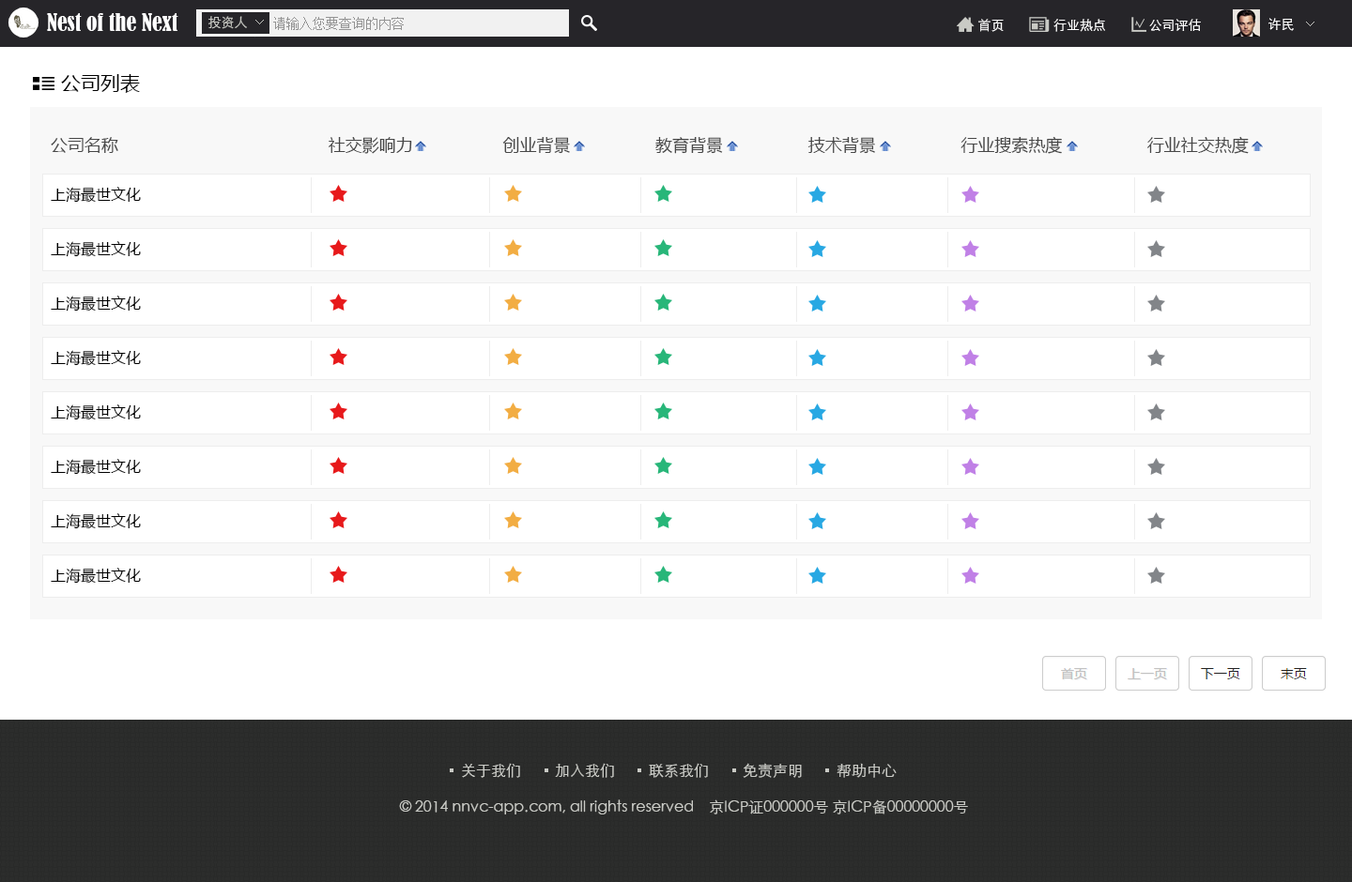
<style>
.page{position:relative;width:1352px;height:882px;background:#ffffff}
.page>*{position:absolute;margin:0}
.t1{font:22.5px "BernardMT-Condensed";color:#ffffff}
.t2{font:13.1px "STXihei";color:#c9cac5}
.t3{font:13.1px "SimSun";color:#949494}
.t4{font:13.1px "STXihei";color:#ffffff}
.t5{font:13.1px "MyriadPro-Regular";color:#c9cac5}
.t6{font:19.7px "MicrosoftYaHei";color:#000000}
.t7{font:16.9px "MicrosoftYaHei";color:#474747}
.t8{font:15px "MicrosoftYaHei";color:#000000}
.t9{font:15px "STXihei";color:#c9cac5}
</style>
<div class="page">
<p class="t1" style="left:47px;top:13px;width:131px;height:18px">Nest of the Next</p>
<p class="t2" style="left:208px;top:16px;width:39px;height:13px">投资人</p>
<p class="t3" style="left:273px;top:17px;width:131px;height:13px">请输入您要查询的内容</p>
<p class="t4" style="left:1268px;top:18px;width:25px;height:13px">许民</p>
<p class="t5" style="left:255px;top:20px;width:9px;height:4px;rotate:-90deg">&lt;</p>
<p class="t4" style="left:978px;top:19px;width:222px;height:13px">首页               行业热点             公司评估</p>
<p class="t5" style="left:1306px;top:22px;width:8px;height:4px;rotate:-90deg">&lt;</p>
<p class="t6" style="left:61px;top:74px;width:79px;height:19px">公司列表</p>
<p class="t7" style="left:51px;top:136px;width:1197px;height:18px">公司名称                                          社交影响力                  创业背景                 教育背景                 技术背景                 行业搜索热度                 行业社交热度</p>
<p class="t8" style="left:51px;top:187px;width:90px;height:16px">上海最世文化</p>
<p class="t8" style="left:51px;top:241px;width:90px;height:16px">上海最世文化</p>
<p class="t8" style="left:51px;top:296px;width:90px;height:16px">上海最世文化</p>
<p class="t8" style="left:51px;top:350px;width:90px;height:16px">上海最世文化</p>
<p class="t8" style="left:51px;top:405px;width:90px;height:15px">上海最世文化</p>
<p class="t8" style="left:51px;top:459px;width:90px;height:16px">上海最世文化</p>
<p class="t8" style="left:51px;top:513px;width:90px;height:16px">上海最世文化</p>
<p class="t8" style="left:51px;top:568px;width:90px;height:16px">上海最世文化</p>
<p class="t9" style="left:462px;top:763px;width:434px;height:15px">关于我们         加入我们         联系我们         免责声明         帮助中心</p>
<p class="t9" style="left:399px;top:800px;width:569px;height:15px">© 2014 nnvc-app.com, all rights reserved    京ICP证000000号 京ICP备00000000号</p>
</div>
